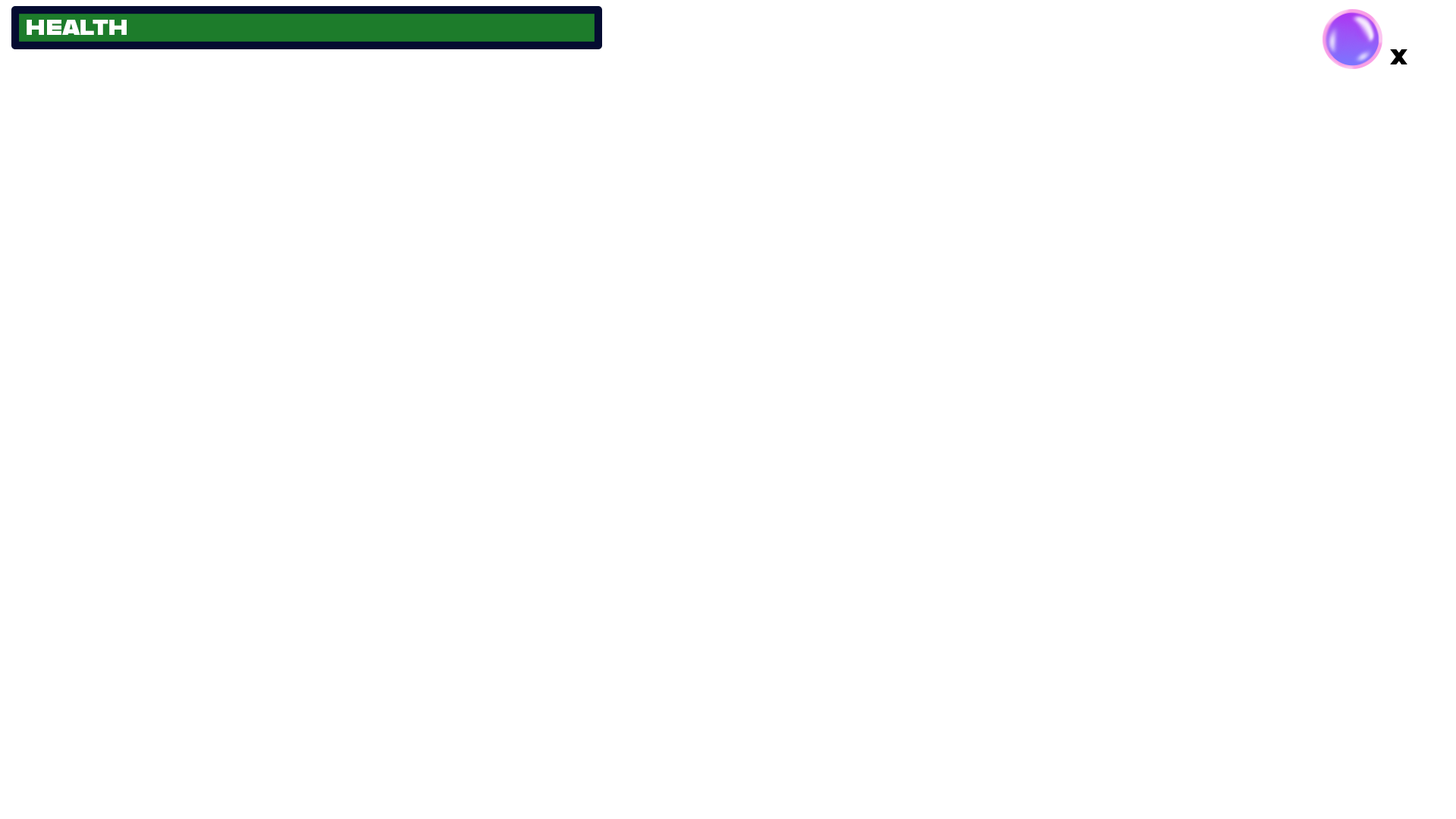
<style>
.page{position:relative;width:1456px;height:819px;background:#ffffff}
.page>*{position:absolute;margin:0}
.t1{font:24.9px "Alfarn";color:#ffffff}
.t2{font:24.9px "Alfarn";color:#000000}
</style>
<div class="page">
<p class="t1" style="left:27px;top:20px;width:100px;height:15px">health</p>
<p class="t2" style="left:1390px;top:49px;width:17px;height:15px">x</p>
</div>
